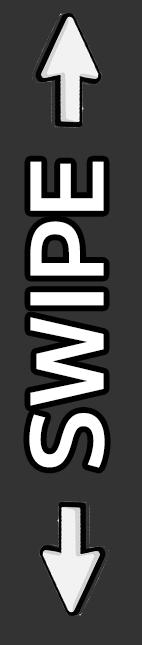
<style>
.page{position:relative;width:142px;height:645px;background:#333333}
.page>*{position:absolute;margin:0}
.t1{font:100px "MPLUS1-SemiBold";color:#ffffff;text-transform:uppercase}
</style>
<div class="page">
<p class="t1" style="left:29px;top:161px;width:76px;height:307px;rotate:-90deg">swipe</p>
</div>
